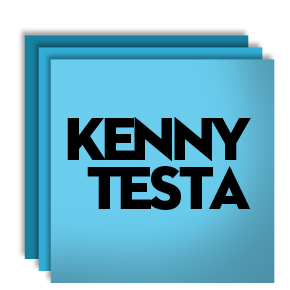
<style>
.page{position:relative;width:290px;height:290px;background:#ffffff}
.page>*{position:absolute;margin:0}
.t1{font:61.4px/48.6px "Neutraface2Display-Titling";letter-spacing:-0.08em;color:#000000}
</style>
<div class="page">
<p class="t1" style="left:67px;top:117px;width:184px;height:93px;text-align:right">KENNY<br>TESTA</p>
</div>
